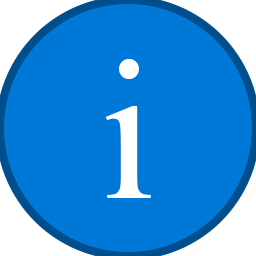
<style>
.page{position:relative;width:256px;height:256px;background:#0078d7}
.page>*{position:absolute;margin:0}
.t1{font:12px "TimesNewRomanPSMT";color:#ffffff}
</style>
<div class="page">
<p class="t1" style="left:105px;top:59px;width:46px;height:139px">i</p>
</div>
